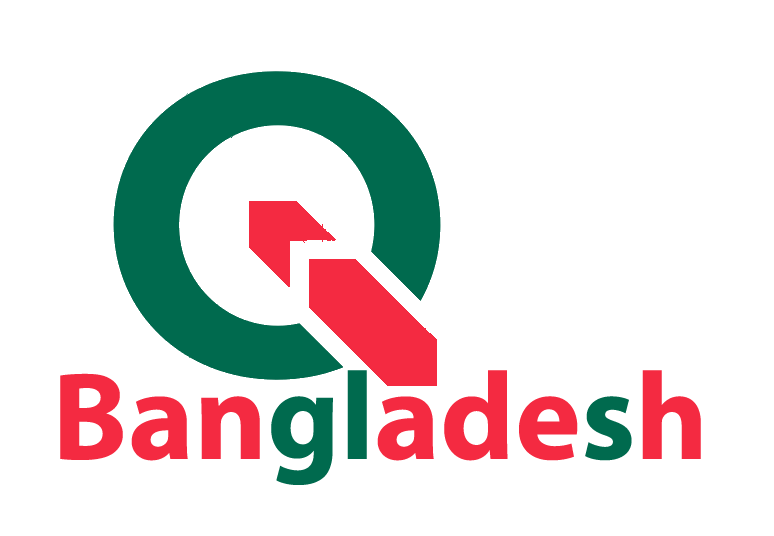
<style>
.page{position:relative;width:774px;height:536px;background:#ffffff}
.page>*{position:absolute;margin:0}
.t1{font:125px "MyriadPro-Bold";color:#f42a41}
.t2{font:125px "MyriadPro-Bold";color:#006a4e}
</style>
<div class="page">
<p class="t1" style="left:60px;top:370px;width:641px;height:115px">Ban<span class="t2">gl</span>ade<span class="t2">s</span>h</p>
</div>
